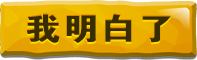
<style>
.page{position:relative;width:197px;height:60px}
.page>*{position:absolute;margin:0}
.t1{font:31.5px "Jdahei";letter-spacing:0.05em;color:#362d00;font-weight:bold;scale:1.11 1}
</style>
<div class="page">
<p class="t1" style="left:26px;top:13px;width:145px;height:30px">我明白了</p>
</div>
